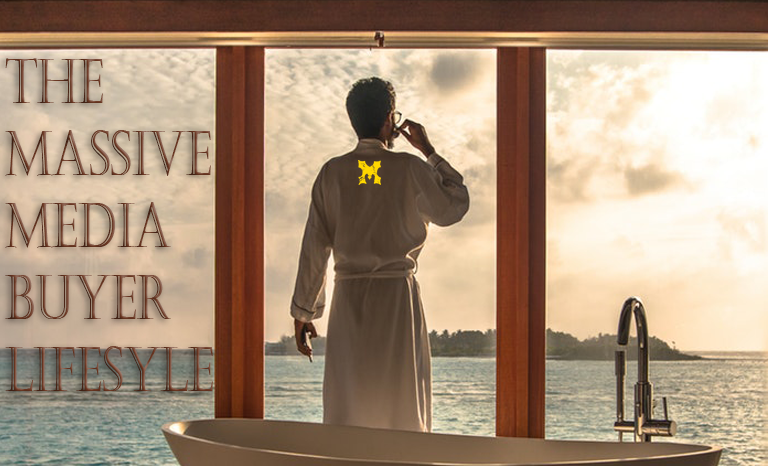
<style>
.page{position:relative;width:768px;height:466px}
.page>*{position:absolute;margin:0}
.t1{font:62.1px/72px "Castellar";scale:0.72 1}
</style>
<div class="page">
<p class="t1" style="left:5px;top:58px;width:208px;height:333px">The Massive Media Buyer Lifesyle</p>
</div>
